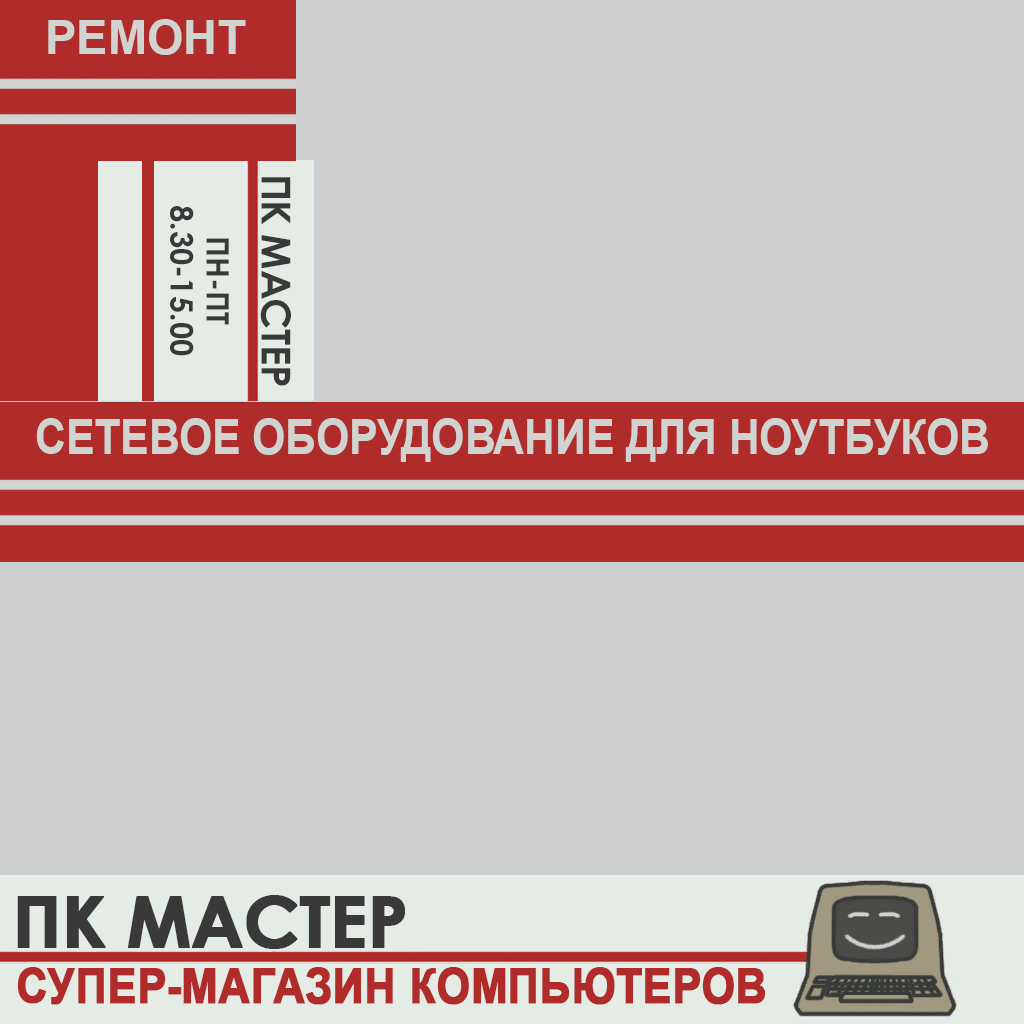
<style>
.page{position:relative;width:1024px;height:1024px;background:#ccced0}
.page>*{position:absolute;margin:0}
.t1{font:47px "Arial-BoldMT";color:#d0d4d0}
.t2{font:40px "CenturyGothic-Bold";letter-spacing:-0.02em;color:#383938}
.t3{font:31px/36px "CenturyGothic-Bold";color:#383938}
.t4{font:31px/14px "CenturyGothic-Bold";color:#383938}
.t5{font:49px "Arial-BoldMT";color:#d0d4d0;scale:0.87 1}
.t6{font:71px "CenturyGothic-Bold";letter-spacing:-0.02em;color:#383938;font-weight:bold}
.t7{font:49px "Arial-BoldMT";color:#b02c2b;font-weight:bold;scale:0.87 1}
</style>
<div class="page">
<p class="t1" style="left:48px;top:19px;width:198px;height:36px">РЕМОНТ</p>
<p class="t2" style="left:260px;top:177px;width:31px;height:209px;rotate:90deg">ПК МАСТЕР</p>
<p class="t3" style="left:170px;top:206px;width:59px;height:150px;text-align:center;rotate:90deg"><span class="t4">ПН-ПТ<br></span>8.30-15.00</p>
<p class="t5" style="left:36px;top:418px;width:952px;height:44px">СЕТЕВОЕ ОБОРУДОВАНИЕ ДЛЯ НОУТБУКОВ</p>
<p class="t6" style="left:17px;top:895px;width:388px;height:54px">ПК МАСТЕР</p>
<p class="t7" style="left:17px;top:967px;width:749px;height:38px">СУПЕР-МАГАЗИН КОМПЬЮТЕРОВ</p>
</div>
